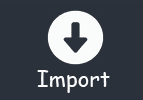
<style>
.page{position:relative;width:143px;height:100px;background:#2a313b}
.page>*{position:absolute;margin:0}
.t1{font:22px "ComicSansMS";color:#fafafb}
</style>
<div class="page">
<p class="t1" style="left:37px;top:70px;width:73px;height:23px">Import</p>
</div>
